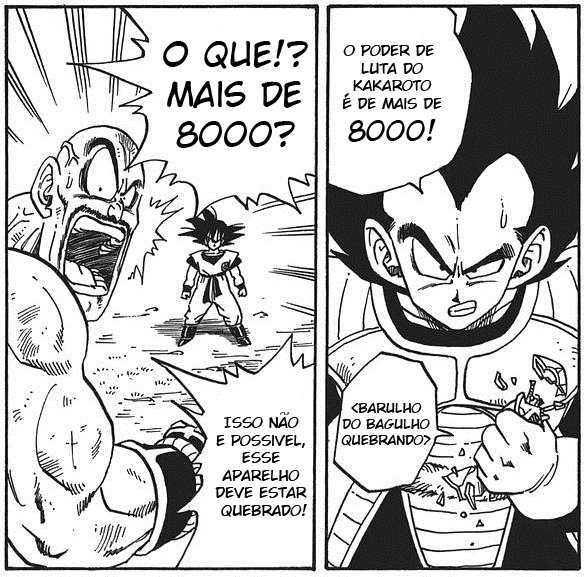
<style>
.page{position:relative;width:587px;height:577px;background:#ffffff}
.page>*{position:absolute;margin:0}
.t1{font:33.3px "CCWildWordsRoman";color:#000000}
.t2{font:13.3px "CCWildWordsRoman";color:#000000}
.t3{font:14.7px "CCWildWordsRoman";color:#000000}
</style>
<div class="page">
<p class="t1" style="left:163px;top:39px;width:145px;height:109px;text-align:center">O que!?<br>Mais de<br>8000?</p>
<p class="t2" style="left:341px;top:403px;width:90px;height:43px;text-align:center">&lt;barulho<br>do bagulho<br>quebrando&gt;</p>
<p class="t3" style="left:215px;top:417px;width:92px;height:100px;text-align:center">Isso nao <br>e possivel, <br>esse <br>aparelho <br>deve estar <br>quebrado!</p>
</div>
